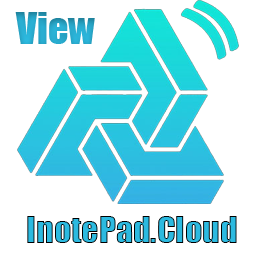
<style>
.page{position:relative;width:256px;height:256px;background:#ffffff}
.page>*{position:absolute;margin:0}
.t1{font:40.1px "Impact";color:#2cbae0}
.t2{font:33.9px "Impact";color:#2cbae0}
</style>
<div class="page">
<p class="t1" style="left:15px;top:12px;width:80px;height:32px">View</p>
<p class="t2" style="left:27px;top:216px;width:210px;height:27px">InotePad.Cloud</p>
</div>
